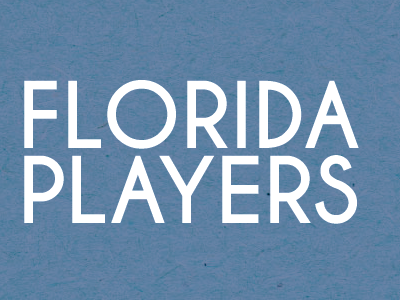
<style>
.page{position:relative;width:400px;height:300px}
.page>*{position:absolute;margin:0}
.t1{font:86px/75px "CaviarDreams-Bold";color:#ffffff}
.t2{font:86px/75px "CaviarDreams-Bold";letter-spacing:-0.08em;color:#ffffff}
</style>
<div class="page">
<p class="t1" style="left:24px;top:80px;width:335px;height:144px">FLORIDA<br>PL<span class="t2">A</span>YERS</p>
</div>
